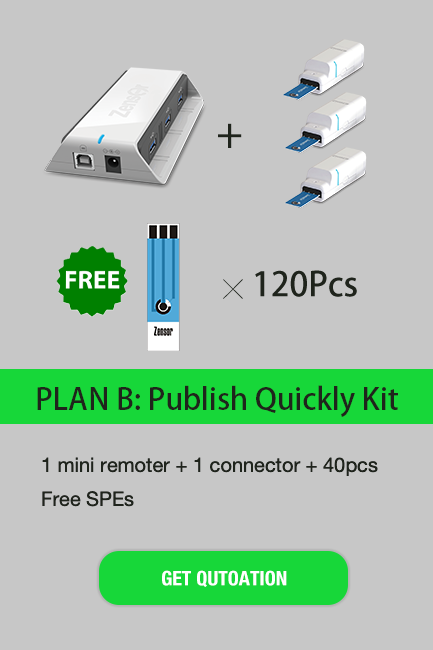
<style>
.page{position:relative;width:433px;height:650px;background:#c7c7c7}
.page>*{position:absolute;margin:0}
.t1{font:40px "AdobeHeitiStd-Regular";color:#1f241c}
.t2{font:33.3px "AdobeHeitiStd-Regular";color:#1f241c}
.t3{font:20px "SimHei";color:#1f241c}
.t4{font:30px "AdobeHeitiStd-Regular";color:#1f241c}
.t5{font:20px/33.8px "HelveticaNeue";color:#1f241c}
.t6{font:20px "HelveticaNeue-CondensedBold";color:#ffffff}
</style>
<div class="page">
<p class="t1" style="left:218px;top:123px;width:24px;height:25px">＋</p>
<p class="t2" style="left:223px;top:270px;width:134px;height:29px"><span class="t3">╳  </span>120Pcs</p>
<p class="t4" style="left:37px;top:385px;width:361px;height:32px">PLAN B: Publish Quickly Kit</p>
<p class="t5" style="left:42px;top:457px;width:336px;height:50px">1 mini remoter + 1 connector + 40pcs Free SPEs</p>
<p class="t6" style="left:162px;top:570px;width:125px;height:17px">GET QUTOATION</p>
</div>
